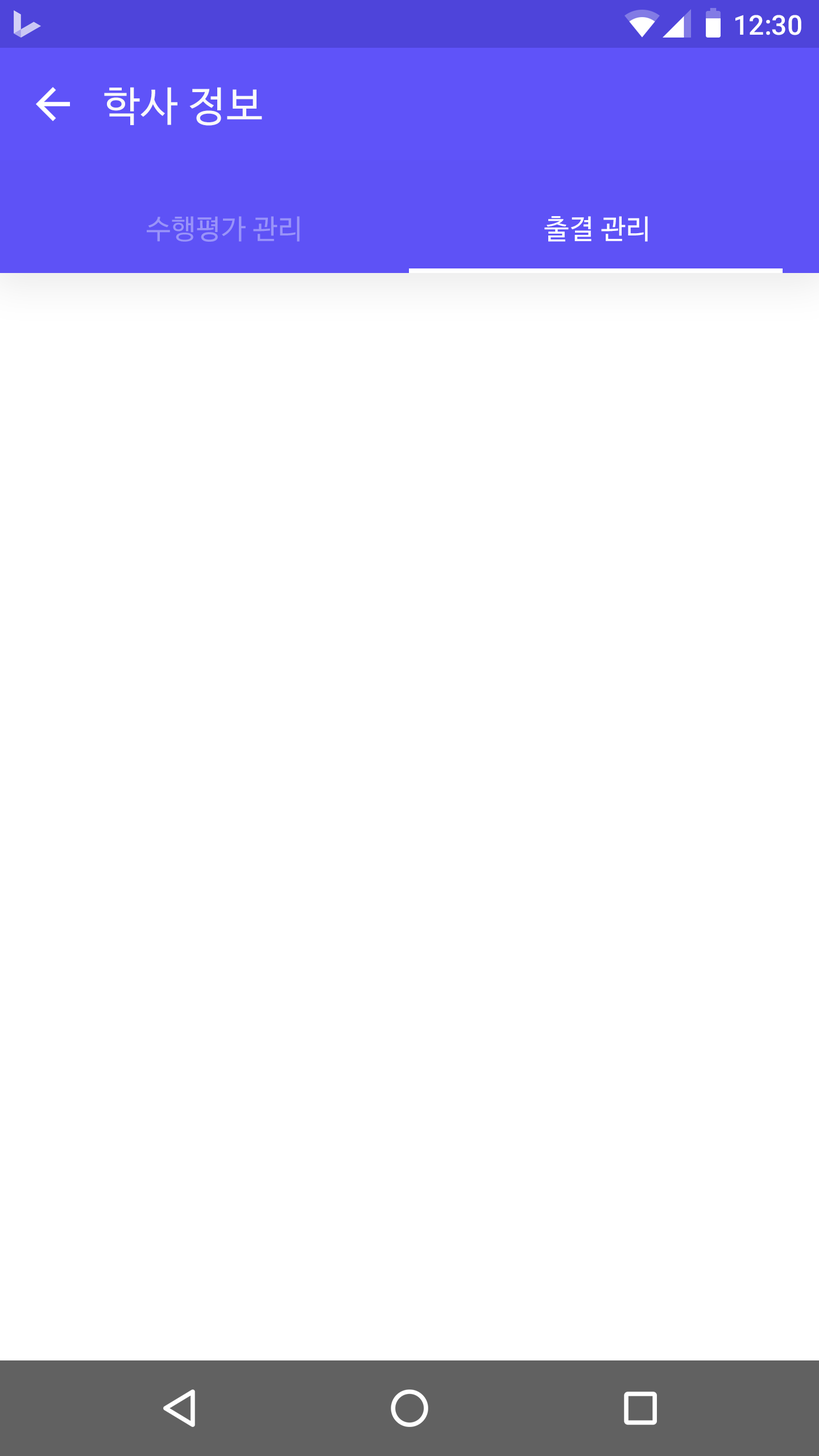
<style>
.page{position:relative;width:819px;height:1456px;background:#ffffff}
.page>*{position:absolute;margin:0}
.t1{font:27.3px "Roboto-Medium";color:#ffffff}
.t2{font:40.9px "NanumBarunGothic";letter-spacing:0.025em;color:#fafafa}
.t3{font:27.3px "NanumBarunGothic";letter-spacing:0.025em;color:#9993f9}
.t4{font:27.3px "NanumBarunGothic";letter-spacing:0.025em;color:#ffffff}
</style>
<div class="page">
<p class="t1" style="left:735px;top:15px;width:66px;height:20px">12:30</p>
<p class="t2" style="left:104px;top:87px;width:158px;height:39px">학사 정보</p>
<p class="t3" style="left:147px;top:216px;width:153px;height:26px">수행평가 관리</p>
<p class="t4" style="left:544px;top:216px;width:104px;height:26px">출결 관리</p>
</div>
